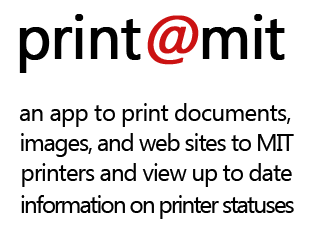
<style>
.page{position:relative;width:310px;height:232px;background:#ffffff}
.page>*{position:absolute;margin:0}
.t1{font:60px "Ebrima";letter-spacing:-0.025em;color:#000000;font-weight:bold}
.t2{font:60px "Ebrima";letter-spacing:-0.025em;color:#cb1212;font-weight:bold;font-style:italic}
.t3{font:24px "Ebrima";letter-spacing:-0.025em;color:#000000}
.t4{font:24px "Ebrima";letter-spacing:-0.05em;color:#000000}
.t5{font:24px "Ebrima";letter-spacing:-0.04em;color:#000000}
.t6{font:24px "Ebrima";letter-spacing:-0.073em;color:#000000}
</style>
<div class="page">
<p class="t1" style="left:19px;top:14px;width:266px;height:59px">print<span class="t2">@</span>mit</p>
<p class="t3" style="left:19px;top:103px;width:272px;height:24px">an app to print documents,</p>
<p class="t4" style="left:21px;top:133px;width:273px;height:24px">images, and web sites to MIT</p>
<p class="t5" style="left:22px;top:163px;width:270px;height:24px">printers and view up to date</p>
<p class="t6" style="left:21px;top:195px;width:273px;height:24px">information on printer statuses</p>
</div>
